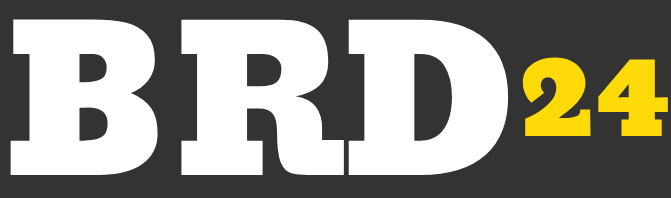
<style>
.page{position:relative;width:671px;height:198px;background:#333333}
.page>*{position:absolute;margin:0}
.t1{font:200px "Angkor-Regular";color:#ffffff}
.t2{font:117px "Angkor-Regular";color:#feda09}
</style>
<div class="page">
<p class="t1" style="left:10px;top:19px;width:499px;height:156px">BRD</p>
<p class="t2" style="left:522px;top:57px;width:146px;height:79px">24</p>
</div>
